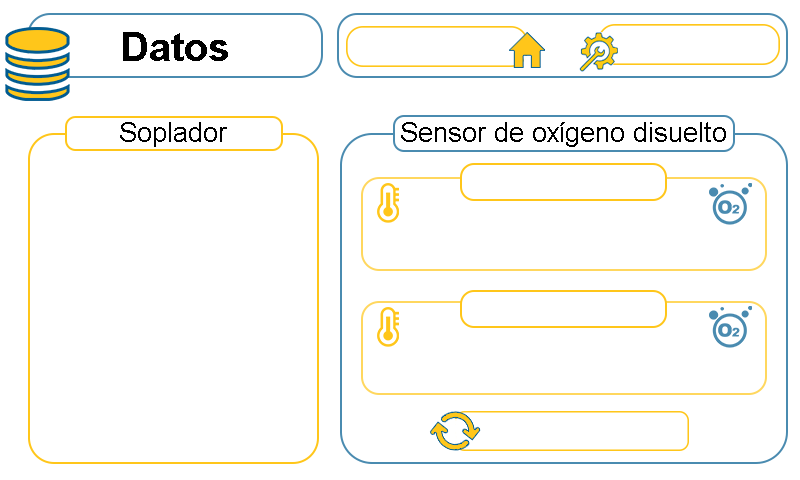
<style>
.page{position:relative;width:800px;height:480px;background:#ffffff}
.page>*{position:absolute;margin:0}
.t1{font:40px "Arial-BoldMT";color:#000000}
.t2{font:26.7px "ArialMT";color:#000000}
</style>
<div class="page">
<p class="t1" style="left:123px;top:32px;width:105px;height:29px">Datos</p>
<p class="t2" style="left:120px;top:122px;width:107px;height:25px">Soplador</p>
<p class="t2" style="left:401px;top:122px;width:325px;height:25px">Sensor de oxígeno disuelto</p>
</div>
